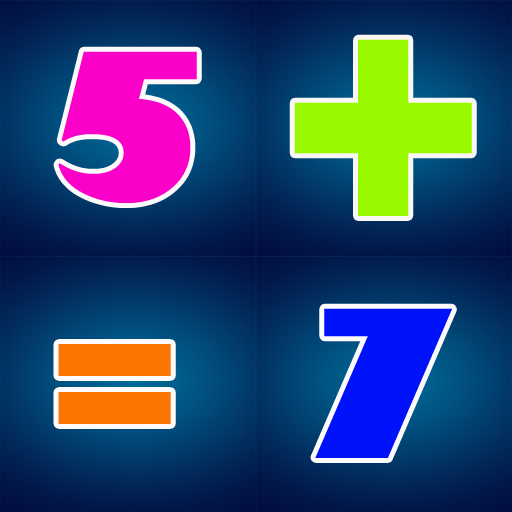
<style>
.page{position:relative;width:512px;height:512px}
.page>*{position:absolute;margin:0}
.t1{font:315.5px "GillSans-UltraBold";color:#99fa00}
.t2{font:200px "GillSans-UltraBold";color:#fa00c8}
.t3{font:200px "GillSans-UltraBold";color:#0012fa}
.t4{font:200px "GillSans-UltraBold";color:#fa7600}
</style>
<div class="page">
<p class="t1" style="left:294px;top:39px;width:178px;height:177px">+</p>
<p class="t2" style="left:58px;top:51px;width:139px;height:152px">5</p>
<p class="t3" style="left:315px;top:308px;width:137px;height:150px">7</p>
<p class="t4" style="left:58px;top:344px;width:113px;height:80px">=</p>
</div>
